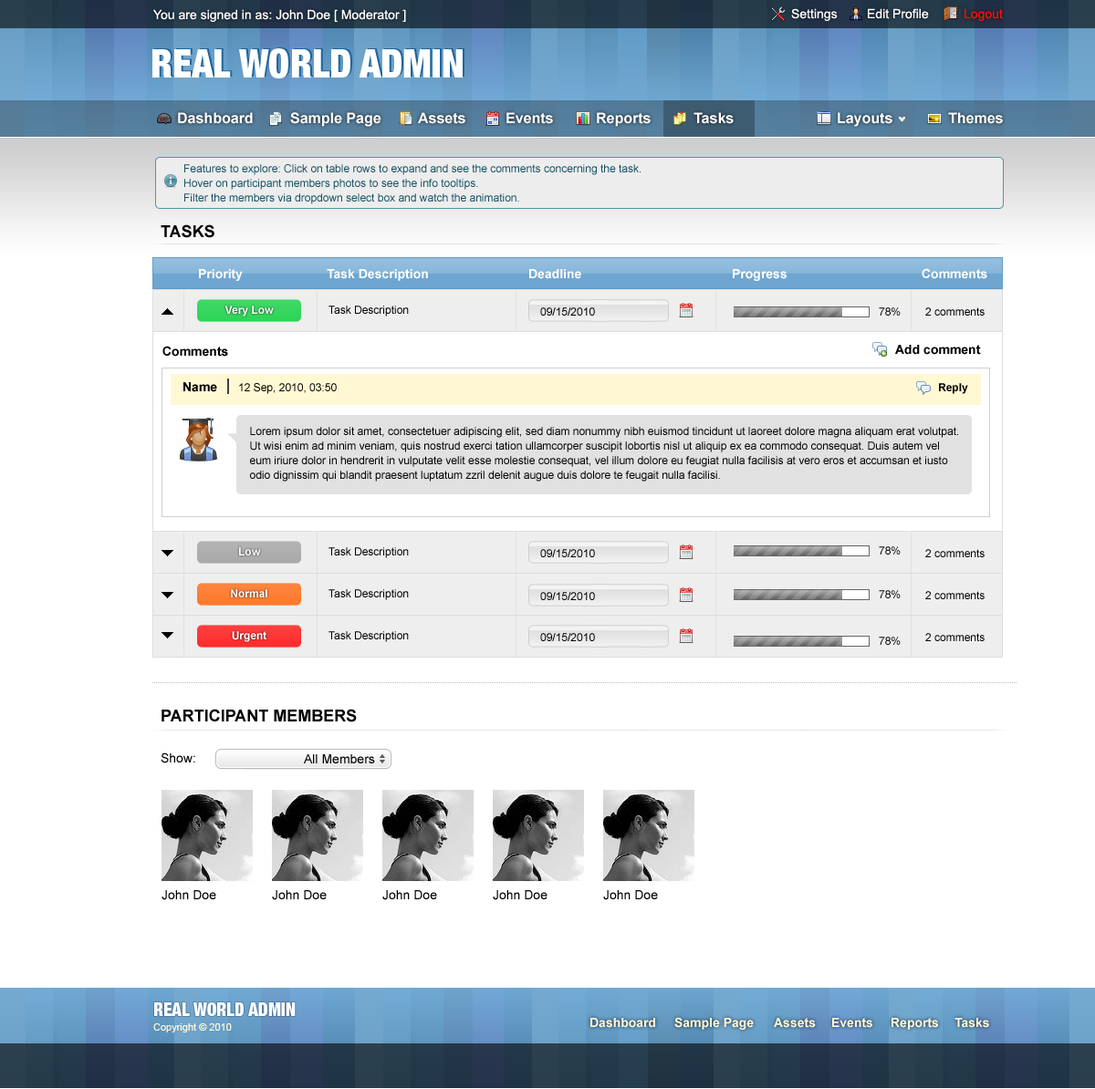
<style>
.page{position:relative;width:1095px;height:1089px;background:#ffffff}
.page>*{position:absolute;margin:0}
.t1{font:12.8px "ArialMT";color:#ffffff}
.t2{font:12.8px "ArialMT";color:#fa0f0f}
.t3{font:14.6px "Arial-BoldMT";color:#ffffff}
.t4{font:10.9px/14.6px "ArialMT";color:#165163}
.t5{font:16.4px "Arial-BoldMT";color:#000000;text-transform:uppercase}
.t6{font:12.8px "Arial-BoldMT";color:#ffffff}
.t7{font:10.9px "Arial-BoldMT";color:#ffffff}
.t8{font:10.9px "ArialMT";color:#000000}
.t9{font:12.8px "Arial-BoldMT";color:#000000}
.t10{font:10.9px "Arial-BoldMT";color:#000000}
.t11{font:10.9px/14.6px "ArialMT";color:#000000}
.t12{font:12.8px "ArialMT";color:#000000}
.t13{font:10px "ArialMT";color:#fff9d8}
.t14{font:12.8px "Arial-BoldMT";color:#fff9d8}
</style>
<div class="page">
<p class="t1" style="left:153px;top:9px;width:253px;height:13px">You are signed in as: John Doe [ Moderator ]</p>
<p class="t1" style="left:791px;top:8px;width:46px;height:13px">Settings</p>
<p class="t1" style="left:868px;top:8px;width:61px;height:11px">Edit Profile</p>
<p class="t2" style="left:964px;top:8px;width:39px;height:13px">Logout</p>
<p class="t3" style="left:178px;top:112px;width:75px;height:12px">Dashboard</p>
<p class="t3" style="left:290px;top:112px;width:91px;height:15px">Sample Page</p>
<p class="t3" style="left:418px;top:112px;width:47px;height:12px">Assets</p>
<p class="t3" style="left:506px;top:112px;width:47px;height:12px">Events</p>
<p class="t3" style="left:597px;top:112px;width:53px;height:15px">Reports</p>
<p class="t3" style="left:693px;top:112px;width:40px;height:12px">Tasks</p>
<p class="t3" style="left:837px;top:112px;width:55px;height:15px">Layouts</p>
<p class="t3" style="left:948px;top:112px;width:55px;height:12px">Themes</p>
<p class="t4" style="left:184px;top:164px;width:456px;height:40px">Features to explore: Click on table rows to expand and see the comments concerning the task.<br>Hover on participant members photos to see the info tooltips.<br>Filter the members via dropdown select box and watch the animation.</p>
<p class="t5" style="left:161px;top:224px;width:53px;height:14px">Tasks</p>
<p class="t6" style="left:199px;top:269px;width:44px;height:12px">Priority</p>
<p class="t6" style="left:327px;top:269px;width:101px;height:12px">Task Description</p>
<p class="t6" style="left:529px;top:269px;width:52px;height:10px">Deadline</p>
<p class="t6" style="left:733px;top:269px;width:53px;height:12px">Progress</p>
<p class="t6" style="left:921px;top:268px;width:66px;height:11px">Comments</p>
<p class="t7" style="left:224px;top:306px;width:50px;height:11px">Very Low</p>
<p class="t8" style="left:328px;top:306px;width:81px;height:11px">Task Description</p>
<p class="t8" style="left:540px;top:307px;width:55px;height:9px">09/15/2010</p>
<p class="t8" style="left:879px;top:307px;width:21px;height:9px">78%</p>
<p class="t8" style="left:925px;top:307px;width:59px;height:9px">2 comments</p>
<p class="t9" style="left:162px;top:346px;width:66px;height:11px">Comments</p>
<p class="t9" style="left:895px;top:345px;width:86px;height:10px">Add comment</p>
<p class="t9" style="left:183px;top:382px;width:34px;height:10px">Name</p>
<p class="t8" style="left:239px;top:383px;width:98px;height:11px">12 Sep, 2010, 03:50</p>
<p class="t10" style="left:939px;top:383px;width:29px;height:11px">Reply</p>
<p class="t11" style="left:250px;top:427px;width:708px;height:55px">Lorem ipsum dolor sit amet, consectetuer adipiscing elit, sed diam nonummy nibh euismod tincidunt ut laoreet dolore magna aliquam erat volutpat. Ut wisi enim ad minim veniam, quis nostrud exerci tation ullamcorper suscipit lobortis nisl ut aliquip ex ea commodo consequat. Duis autem vel eum iriure dolor in hendrerit in vulputate velit esse molestie consequat, vel illum dolore eu feugiat nulla facilisis at vero eros et accumsan et iusto odio dignissim qui blandit praesent luptatum zzril delenit augue duis dolore te feugait nulla facilisi.</p>
<p class="t7" style="left:239px;top:547px;width:22px;height:9px">Low</p>
<p class="t8" style="left:328px;top:547px;width:81px;height:11px">Task Description</p>
<p class="t8" style="left:540px;top:549px;width:55px;height:8px">09/15/2010</p>
<p class="t8" style="left:879px;top:546px;width:21px;height:9px">78%</p>
<p class="t8" style="left:925px;top:549px;width:59px;height:8px">2 comments</p>
<p class="t7" style="left:231px;top:589px;width:36px;height:9px">Normal</p>
<p class="t8" style="left:328px;top:589px;width:81px;height:11px">Task Description</p>
<p class="t8" style="left:540px;top:592px;width:55px;height:8px">09/15/2010</p>
<p class="t8" style="left:879px;top:590px;width:21px;height:8px">78%</p>
<p class="t8" style="left:925px;top:591px;width:59px;height:8px">2 comments</p>
<p class="t7" style="left:232px;top:631px;width:34px;height:11px">Urgent</p>
<p class="t8" style="left:328px;top:631px;width:81px;height:11px">Task Description</p>
<p class="t8" style="left:540px;top:633px;width:55px;height:8px">09/15/2010</p>
<p class="t8" style="left:879px;top:637px;width:21px;height:8px">78%</p>
<p class="t8" style="left:925px;top:633px;width:59px;height:8px">2 comments</p>
<p class="t5" style="left:161px;top:709px;width:196px;height:14px">Participant Members</p>
<p class="t12" style="left:161px;top:753px;width:34px;height:11px">Show:</p>
<p class="t12" style="left:304px;top:754px;width:71px;height:10px">All Members</p>
<p class="t12" style="left:161px;top:890px;width:55px;height:10px">John Doe</p>
<p class="t12" style="left:272px;top:890px;width:55px;height:10px">John Doe</p>
<p class="t12" style="left:382px;top:890px;width:55px;height:10px">John Doe</p>
<p class="t12" style="left:493px;top:890px;width:54px;height:10px">John Doe</p>
<p class="t12" style="left:603px;top:890px;width:55px;height:10px">John Doe</p>
<p class="t13" style="left:153px;top:1024px;width:79px;height:9px">Copyright © 2010</p>
<p class="t14" style="left:590px;top:1018px;width:65px;height:10px">Dashboard</p>
<p class="t14" style="left:674px;top:1017px;width:80px;height:13px">Sample Page</p>
<p class="t14" style="left:774px;top:1018px;width:42px;height:10px">Assets</p>
<p class="t14" style="left:832px;top:1018px;width:40px;height:10px">Events</p>
<p class="t14" style="left:891px;top:1018px;width:47px;height:12px">Reports</p>
<p class="t14" style="left:954px;top:1018px;width:35px;height:10px">Tasks</p>
</div>
